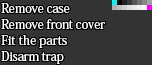
<style>
.page{position:relative;width:152px;height:65px;background:#333333}
.page>*{position:absolute;margin:0}
.t1{font:12.9px/16px "KozMinPro-Medium";letter-spacing:-0.025em;color:#ffffff;scale:0.95 1}
.t2{font:12.9px/16px "KozMinPro-Medium";letter-spacing:-0.01em;color:#ffffff;scale:0.95 1}
.t3{font:12.9px/16px "KozMinPro-Medium";letter-spacing:-0.025em;color:#ffffff;scale:0.94 1}
</style>
<div class="page">
<p class="t1" style="left:1px;top:3px;width:104px;height:61px">Remove case<br>Remove front cover<br><span class="t2">Fit the parts<br></span><span class="t3">Disarm trap</span></p>
</div>
